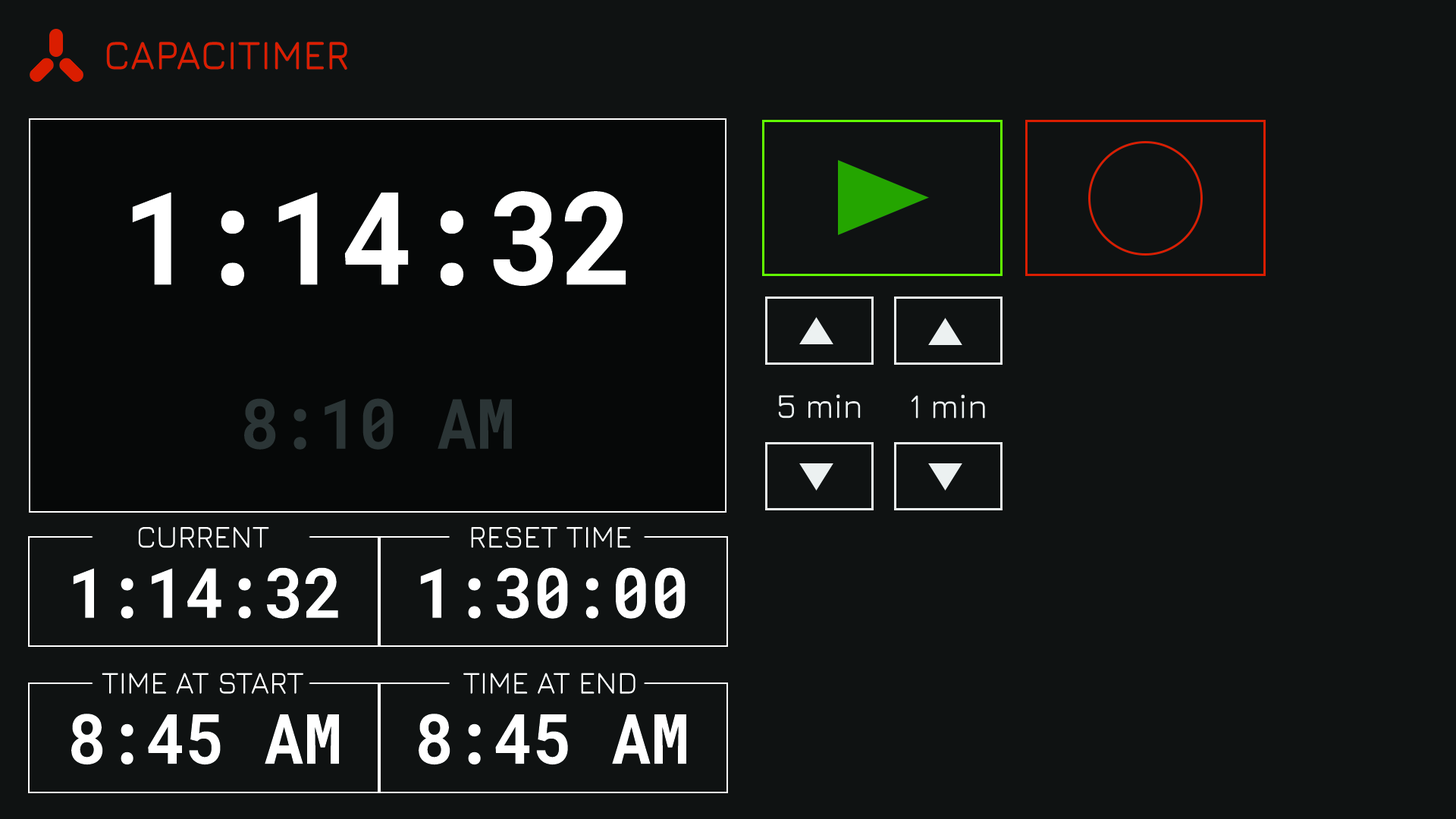
<style>
.page{position:relative;width:1456px;height:819px;background:#0f1212}
.page>*{position:absolute;margin:0}
.t1{font:41.1px "Jura-SemiBold";color:#da1d00;scale:0.94 1}
.t2{font:129.5px "RobotoMono-Bold";color:#ffffff;scale:0.94 1}
.t3{font:69.5px "RobotoMono-Bold";color:#2b3436;scale:0.94 1}
.t4{font:34.8px "Jura-Medium";color:#ecf1f1;scale:0.94 1}
.t5{font:31.6px "Jura-Medium";color:#ffffff;scale:0.94 1}
.t6{font:69.5px "RobotoMono-Bold";color:#ffffff;scale:0.94 1}
</style>
<div class="page">
<p class="t1" style="left:106px;top:42px;width:241px;height:28px">CAPACITIMER</p>
<p class="t2" style="left:132px;top:191px;width:494px;height:95px">1:14:32</p>
<p class="t3" style="left:244px;top:398px;width:268px;height:52px">8:10 AM</p>
<p class="t4" style="left:778px;top:394px;width:83px;height:25px">5 min</p>
<p class="t4" style="left:911px;top:394px;width:74px;height:25px">1 min</p>
<p class="t5" style="left:138px;top:527px;width:131px;height:21px">CURRENT</p>
<p class="t5" style="left:471px;top:527px;width:160px;height:21px">RESET TIME</p>
<p class="t6" style="left:73px;top:567px;width:265px;height:52px">1:14:32</p>
<p class="t6" style="left:420px;top:567px;width:266px;height:52px">1:30:00</p>
<p class="t5" style="left:102px;top:673px;width:201px;height:21px">TIME AT START</p>
<p class="t5" style="left:463px;top:673px;width:172px;height:21px">TIME AT END</p>
<p class="t6" style="left:71px;top:714px;width:268px;height:51px">8:45 AM</p>
<p class="t6" style="left:419px;top:714px;width:267px;height:51px">8:45 AM</p>
</div>
